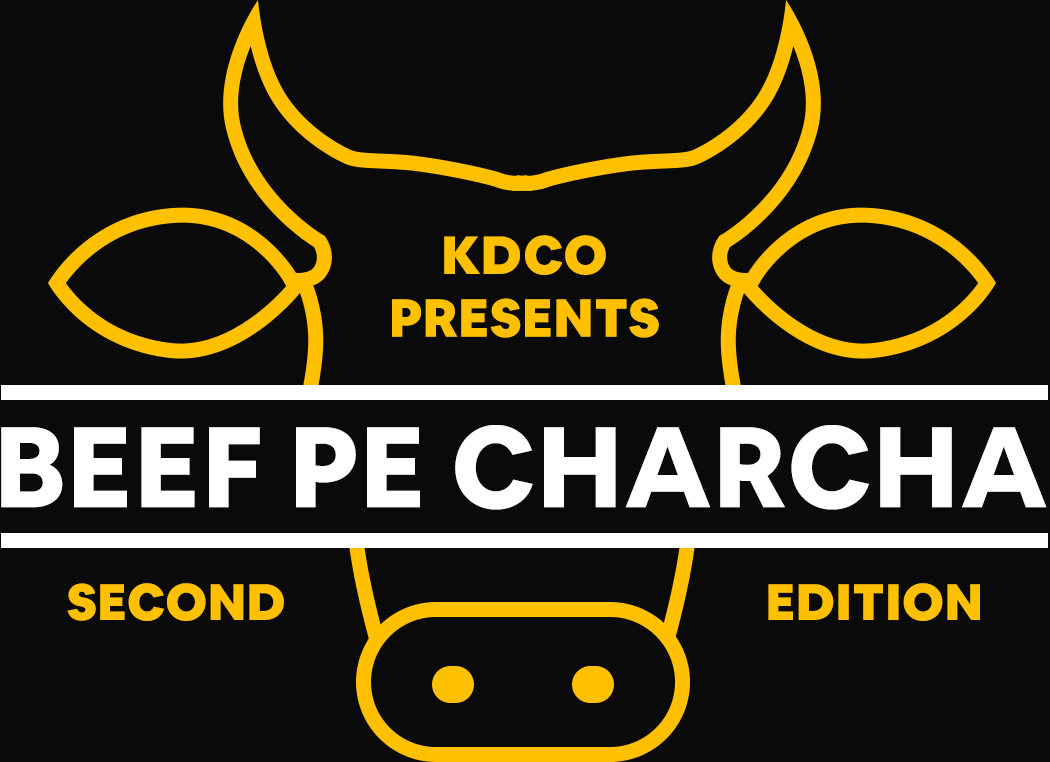
<style>
.page{position:relative;width:1050px;height:762px;background:#0a0a0a}
.page>*{position:absolute;margin:0}
.t1{font:52.5px "AirbnbCerealApp-Black";color:#ffc000;text-transform:uppercase}
.t2{font:112.6px "AirbnbCerealApp-ExtraBold";color:#ffffff;text-transform:uppercase}
.t3{font:50px "AirbnbCerealApp-Black";color:#ffc000;text-transform:uppercase}
</style>
<div class="page">
<p class="t1" style="left:392px;top:235px;width:267px;height:103px;text-align:center">KDCO<br>presents</p>
<p class="t2" style="left:1px;top:425px;width:1046px;height:85px">BEEF pe charcha</p>
<p class="t3" style="left:67px;top:583px;width:217px;height:38px">second</p>
<p class="t3" style="left:768px;top:583px;width:212px;height:38px">edition</p>
</div>
